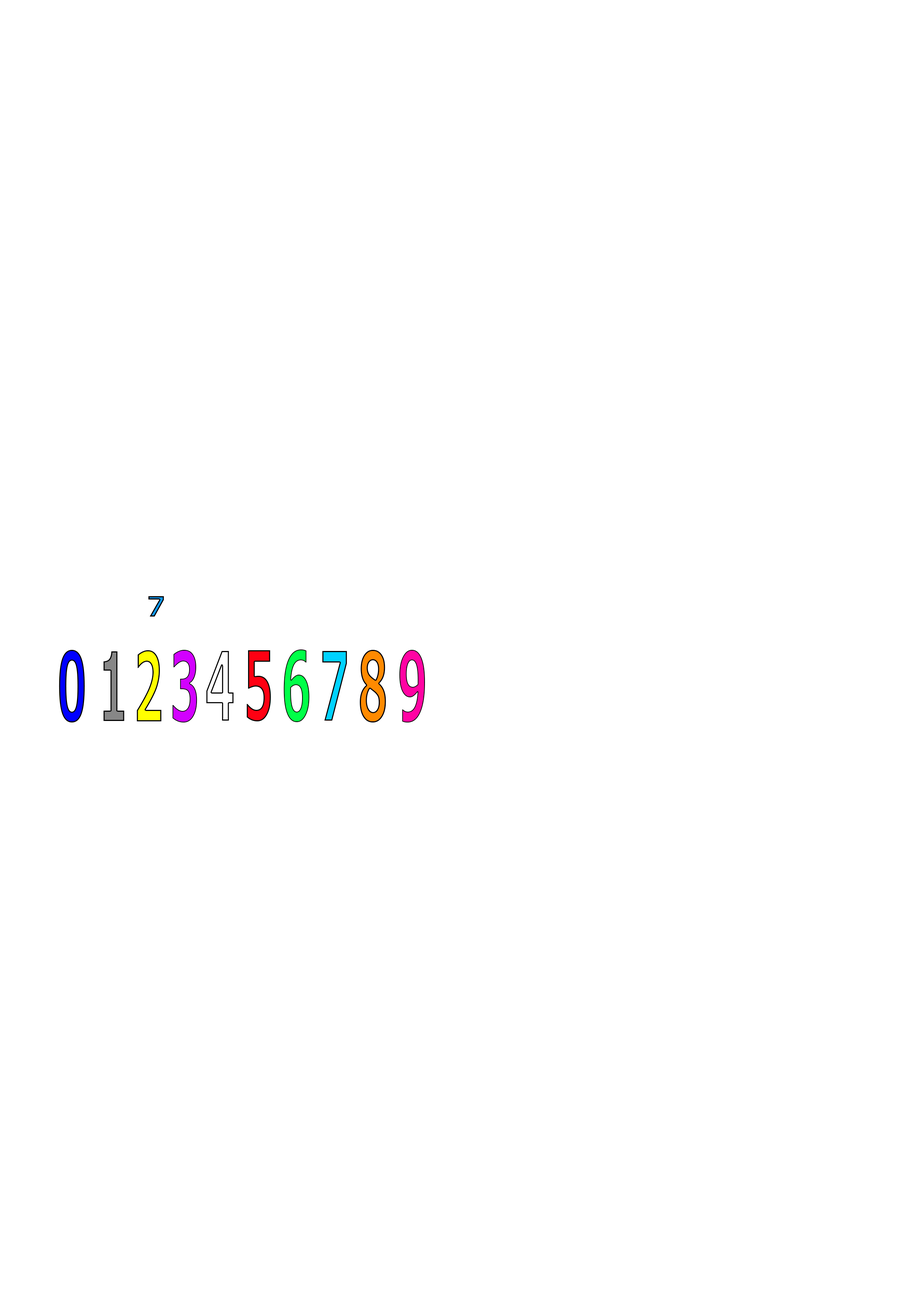
<style>
.page{position:relative;width:918px;height:1299px;background:#ffffff}
.page>*{position:absolute;margin:0}
.t1{font:27.8px "Meiryo-Bold"}
.t2{font:94.8px "Meiryo-Bold";color:#0000ff;scale:0.47 1}
.t3{font:94.8px "Meiryo-Bold";color:#878787;scale:0.47 1}
.t4{font:94.8px "Meiryo-Bold";color:#ffff00;scale:0.47 1}
.t5{font:94.8px "Meiryo-Bold";color:#d200ff;scale:0.47 1}
.t6{font:94.8px "Meiryo-Bold";color:#ffffff;scale:0.47 1}
.t7{font:94.8px "Meiryo-Bold";color:#ff0012;scale:0.47 1}
.t8{font:94.8px "Meiryo-Bold";color:#00ff48;scale:0.47 1}
.t9{font:94.8px "Meiryo-Bold";color:#00d2ff;scale:0.47 1}
.t10{font:94.8px "Meiryo-Bold";color:#ff8a00;scale:0.47 1}
.t11{font:94.8px "Meiryo-Bold";color:#ff03a3;scale:0.47 1}
</style>
<div class="page">
<p class="t1" style="left:148px;top:596px;width:16px;height:20px">7</p>
<p class="t2" style="left:59px;top:650px;width:26px;height:72px">0</p>
<p class="t3" style="left:103px;top:651px;width:21px;height:70px">1</p>
<p class="t4" style="left:137px;top:650px;width:24px;height:71px">2</p>
<p class="t5" style="left:173px;top:650px;width:24px;height:72px">3</p>
<p class="t6" style="left:206px;top:651px;width:28px;height:69px">4</p>
<p class="t7" style="left:247px;top:650px;width:24px;height:71px">5</p>
<p class="t8" style="left:284px;top:649px;width:26px;height:73px">6</p>
<p class="t9" style="left:322px;top:651px;width:25px;height:69px">7</p>
<p class="t10" style="left:360px;top:650px;width:26px;height:72px">8</p>
<p class="t11" style="left:399px;top:650px;width:26px;height:72px">9</p>
</div>
